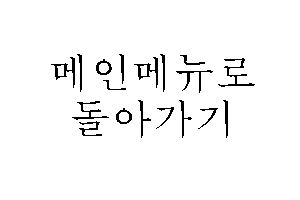
<style>
.page{position:relative;width:300px;height:200px;background:#ffffff}
.page>*{position:absolute;margin:0}
.t1{font:41.7px/45.8px "MBatang";color:#000000}
</style>
<div class="page">
<p class="t1" style="left:51px;top:54px;width:204px;height:84px">메인메뉴로<br> 돌아가기</p>
</div>
